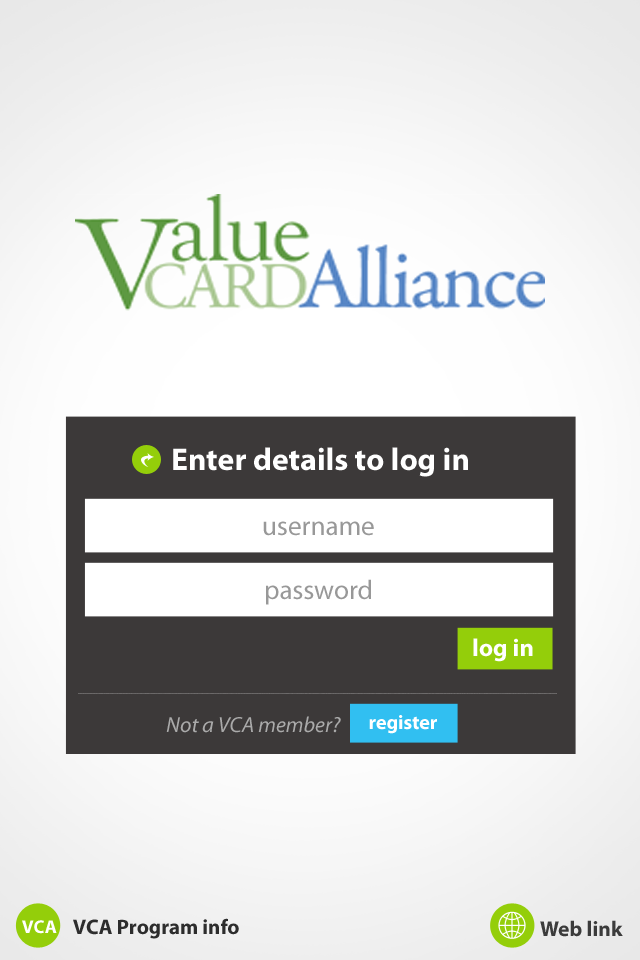
<style>
.page{position:relative;width:640px;height:960px}
.page>*{position:absolute;margin:0}
.t1{font:31.7px "MyriadPro-Bold";color:#ffffff}
.t2{font:27.2px "MyriadPro-Regular";color:#989898}
.t3{font:24.6px "MyriadPro-Bold";color:#ffffff}
.t4{font:21.9px "MyriadPro-It";color:#aaaaaa}
.t5{font:19.9px "MyriadPro-Bold";color:#ffffff}
.t6{font:21px "MyriadPro-Bold";color:#2d2d2d}
.t7{font:18.5px "MyriadPro-Bold";color:#ffffff}
.t8{font:21.4px "MyriadPro-Bold";color:#3b3b3b}
</style>
<div class="page">
<p class="t1" style="left:173px;top:447px;width:295px;height:30px">Enter details to log in</p>
<p class="t2" style="left:263px;top:521px;width:111px;height:15px">username</p>
<p class="t2" style="left:266px;top:579px;width:105px;height:26px">password</p>
<p class="t3" style="left:473px;top:638px;width:60px;height:24px">log in</p>
<p class="t4" style="left:166px;top:716px;width:175px;height:17px">Not a VCA member?</p>
<p class="t5" style="left:369px;top:715px;width:68px;height:19px">register</p>
<p class="t6" style="left:73px;top:918px;width:166px;height:21px">VCA Program info</p>
<p class="t7" style="left:22px;top:920px;width:35px;height:14px">VCA</p>
<p class="t8" style="left:540px;top:920px;width:83px;height:17px">Web link</p>
</div>
